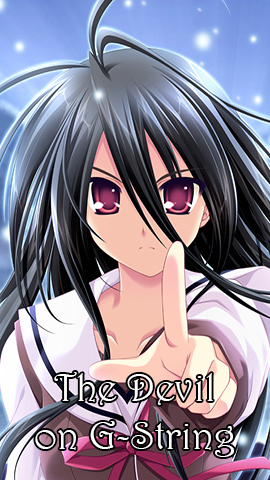
<style>
.page{position:relative;width:270px;height:480px}
.page>*{position:absolute;margin:0}
.t1{font:40px "Harrington";color:#ffffff}
</style>
<div class="page">
<p class="t1" style="left:35px;top:372px;width:199px;height:85px;text-align:center">The Devil<br>on G-String</p>
</div>
